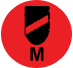
<style>
.page{position:relative;width:73px;height:68px;background:#ea2025}
.page>*{position:absolute;margin:0}
.t1{font:19.4px "ArialRoundedMTBold";color:#000000}
</style>
<div class="page">
<p class="t1" style="left:30px;top:47px;width:14px;height:14px">M</p>
</div>
